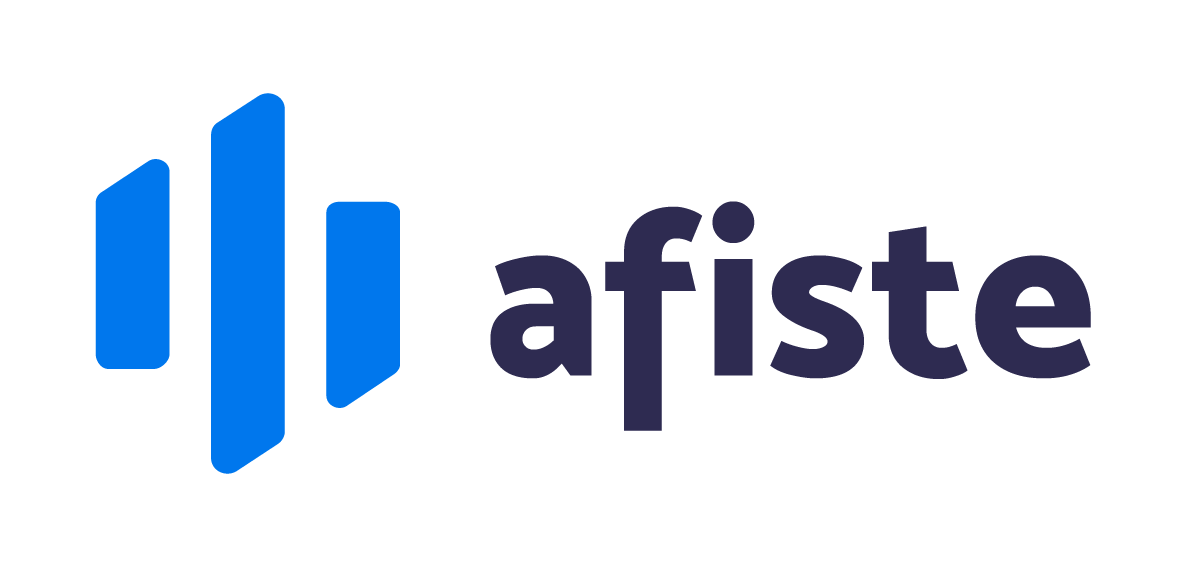
<style>
.page{position:relative;width:1200px;height:567px;background:#ffffff}
.page>*{position:absolute;margin:0}
.t1{font:240px "MoskExtra-Bold800";color:#2e2b51}
</style>
<div class="page">
<p class="t1" style="left:490px;top:201px;width:601px;height:230px">afiste</p>
</div>
